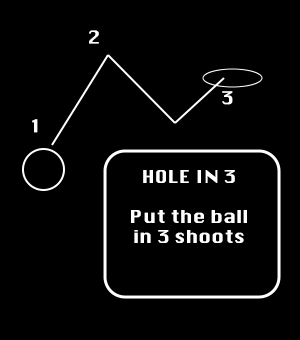
<style>
.page{position:relative;width:300px;height:340px;background:#000000}
.page>*{position:absolute;margin:0}
.t1{font:17.4px "Krungthep";letter-spacing:-0.02em;color:#ffffff;scale:1.15 1}
.t2{font:17.4px/20px "Krungthep";letter-spacing:-0.02em;color:#ffffff;scale:1.15 1}
</style>
<div class="page">
<p class="t1" style="left:89px;top:30px;width:10px;height:14px">2</p>
<p class="t1" style="left:222px;top:91px;width:11px;height:14px">3</p>
<p class="t1" style="left:32px;top:119px;width:6px;height:14px">1</p>
<p class="t2" style="left:131px;top:170px;width:116px;height:73px;text-align:center">HOLE IN 3<br><br>Put the ball<br>in 3 shoots</p>
</div>
